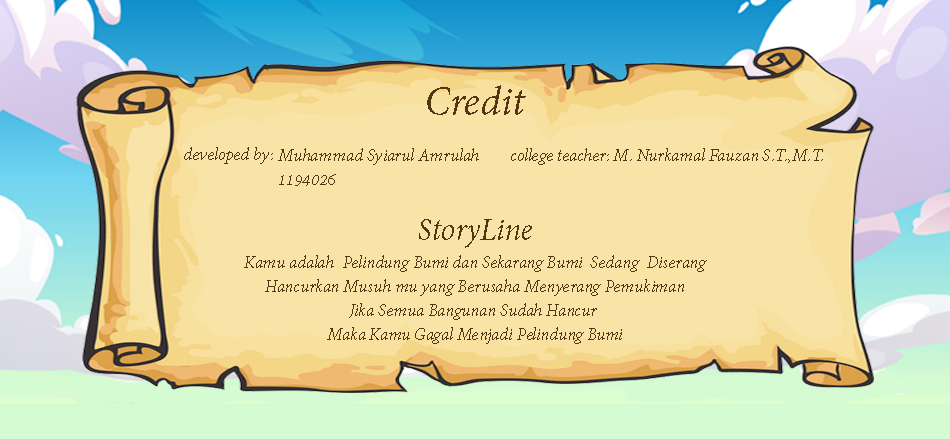
<style>
.page{position:relative;width:950px;height:439px;background:#f8e4a7}
.page>*{position:absolute;margin:0}
.t1{font:44.6px "AdobeDevanagari-Italic";color:#533413}
.t2{font:18.6px "AdobeDevanagari-Italic";color:#533413}
.t3{font:18.6px/24.1px "AdobeDevanagari-Italic";color:#533413}
.t4{font:34px "AdobeDevanagari-Italic";color:#533413}
</style>
<div class="page">
<p class="t1" style="left:427px;top:85px;width:99px;height:30px">Credit</p>
<p class="t2" style="left:184px;top:147px;width:89px;height:17px">developed by:</p>
<p class="t3" style="left:278px;top:148px;width:201px;height:38px">Muhammad Syiarul Amrulah<br>1194026</p>
<p class="t2" style="left:511px;top:148px;width:312px;height:17px">college teacher: M. Nurkamal Fauzan S.T.,M.T.</p>
<p class="t4" style="left:419px;top:219px;width:113px;height:29px">StoryLine</p>
<p class="t3" style="left:244px;top:255px;width:463px;height:89px;text-align:center">Kamu adalah  Pelindung Bumi dan Sekarang Bumi  Sedang  Diserang<br>Hancurkan Musuh mu yang Berusaha Menyerang Pemukiman<br>Jika Semua Bangunan Sudah Hancur <br>Maka Kamu Gagal Menjadi Pelindung Bumi</p>
</div>
